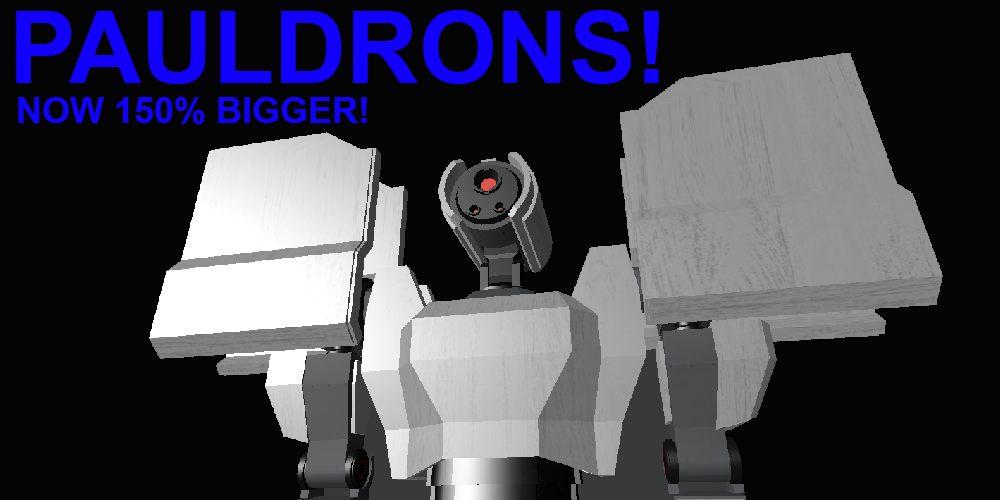
<style>
.page{position:relative;width:1000px;height:500px;background:#040404}
.page>*{position:absolute;margin:0}
.t1{font:100px "Arial-BoldMT";color:#1200ff}
.t2{font:36px "Arial-BoldMT";color:#1200ff}
</style>
<div class="page">
<p class="t1" style="left:16px;top:10px;width:643px;height:74px">PAULDRONS!</p>
<p class="t2" style="left:18px;top:97px;width:349px;height:27px">NOW 150% BIGGER!</p>
</div>
